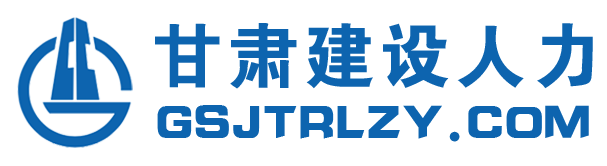
<style>
.page{position:relative;width:607px;height:166px;background:#ffffff}
.page>*{position:absolute;margin:0}
.t1{font:71.6px "FZDHTJW--GB1-0";letter-spacing:0.06em;color:#0d64af}
.t2{font:47.7px "JLinXin";letter-spacing:-0.02em;color:#0d64af}
</style>
<div class="page">
<p class="t1" style="left:155px;top:23px;width:438px;height:66px">甘肃建设人力</p>
<p class="t2" style="left:157px;top:105px;width:432px;height:37px">GSJTRLZY.COM</p>
</div>
